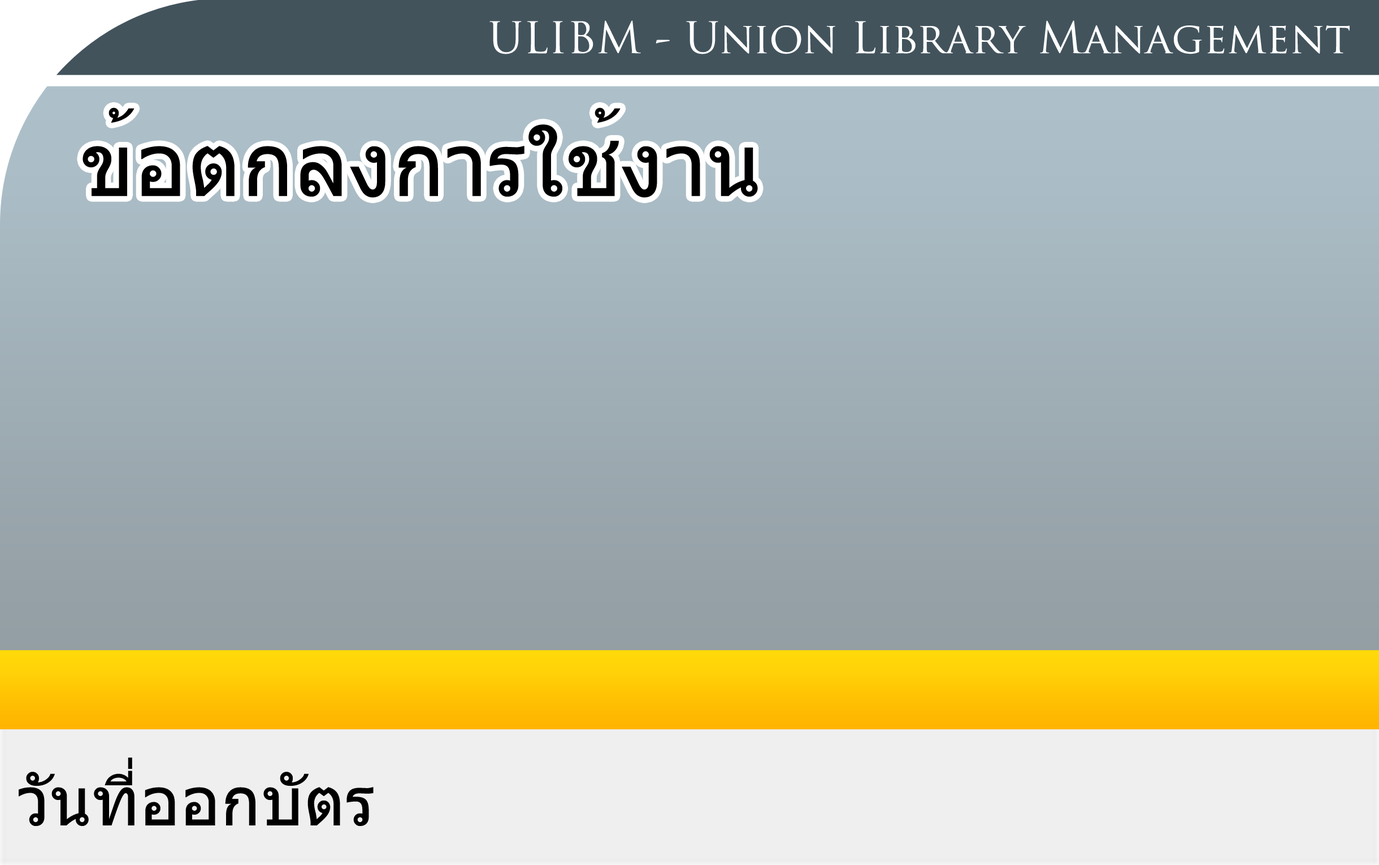
<style>
.page{position:relative;width:1379px;height:865px}
.page>*{position:absolute;margin:0}
.t1{font:42.4px "TrajanPro-Regular";color:#ffffff}
.t2{font:88.5px "Tahoma";color:#000000}
.t3{font:67.8px "Tahoma";color:#000000}
</style>
<div class="page">
<p class="t1" style="left:489px;top:20px;width:861px;height:34px">ULIBM - Union Library Management</p>
<p class="t2" style="left:83px;top:107px;width:675px;height:91px">ข้อตกลงการใช้งาน</p>
<p class="t3" style="left:19px;top:757px;width:355px;height:69px">วันที่ออกบัตร</p>
</div>
